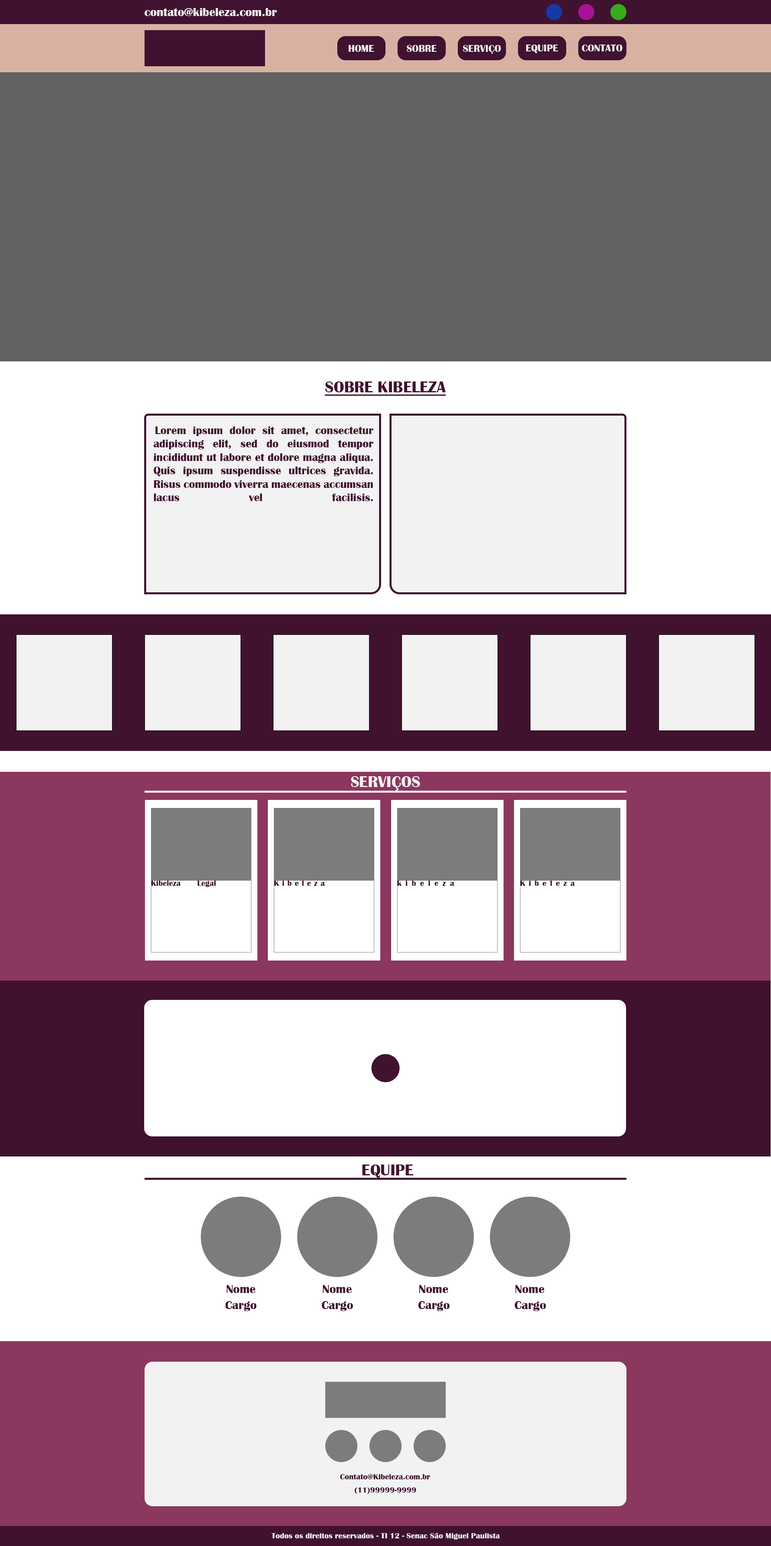
<style>
.page{position:relative;width:771px;height:1546px;background:#ffffff}
.page>*{position:absolute;margin:0}
.t1{font:12px "BritannicBold";color:#f2f2f2}
.t2{font:10px "BritannicBold";color:#f2f2f2}
.t3{font:16.1px "BritannicBold";color:#401230;text-decoration:underline}
.t4{font:11.2px "BritannicBold";color:#401230}
.t5{font:16.1px "BritannicBold";color:#f2f2f2}
.t6{font:8px "BritannicBold";color:#401230}
.t7{font:16.1px "BritannicBold";color:#401230}
.t8{font:12px "BritannicBold";color:#401230}
.t9{font:8px "BritannicBold";color:#f2f2f2}
</style>
<div class="page">
<p class="t1" style="left:145px;top:8px;width:132px;height:8px">contato@kibeleza.com.br</p>
<p class="t2" style="left:349px;top:45px;width:25px;height:7px">HOME</p>
<p class="t2" style="left:407px;top:45px;width:30px;height:7px">SOBRE</p>
<p class="t2" style="left:463px;top:45px;width:38px;height:9px">SERVIÇO</p>
<p class="t2" style="left:526px;top:45px;width:32px;height:8px">EQUIPE</p>
<p class="t2" style="left:582px;top:45px;width:41px;height:6px">CONTATO</p>
<p class="t3" style="left:325px;top:382px;width:121px;height:14px">SOBRE KIBELEZA</p>
<p class="t4" style="left:153px;top:426px;width:221px;height:75px;text-align:justify">Lorem ipsum dolor sit amet, consectetur adipiscing elit, sed do eiusmod tempor incididunt ut labore et dolore magna aliqua. Quis ipsum suspendisse ultrices gravida. Risus commodo viverra maecenas accumsan lacus vel facilisis.</p>
<p class="t5" style="left:351px;top:776px;width:69px;height:15px">SERVIÇOS</p>
<p class="t6" style="left:151px;top:881px;width:65px;height:6px">Kibeleza Legal</p>
<p class="t6" style="left:274px;top:881px;width:51px;height:5px">Kibeleza</p>
<p class="t6" style="left:397px;top:881px;width:58px;height:5px">kibeleza</p>
<p class="t6" style="left:521px;top:881px;width:54px;height:5px">Kibeleza</p>
<p class="t7" style="left:362px;top:1165px;width:52px;height:13px">EQUIPE</p>
<p class="t8" style="left:227px;top:1285px;width:28px;height:8px">Nome</p>
<p class="t8" style="left:323px;top:1285px;width:29px;height:8px">Nome</p>
<p class="t8" style="left:419px;top:1285px;width:29px;height:8px">Nome</p>
<p class="t8" style="left:515px;top:1285px;width:30px;height:8px">Nome</p>
<p class="t8" style="left:225px;top:1301px;width:32px;height:10px">Cargo</p>
<p class="t8" style="left:322px;top:1301px;width:31px;height:10px">Cargo</p>
<p class="t8" style="left:418px;top:1301px;width:32px;height:10px">Cargo</p>
<p class="t8" style="left:514px;top:1301px;width:32px;height:10px">Cargo</p>
<p class="t6" style="left:340px;top:1474px;width:90px;height:6px">Contato@Kibeleza.com.br</p>
<p class="t6" style="left:355px;top:1487px;width:61px;height:7px">(11)99999-9999</p>
<p class="t9" style="left:271px;top:1533px;width:229px;height:7px">Todos os direitos reservados - TI 12 - Senac São Miguel Paulista</p>
</div>
